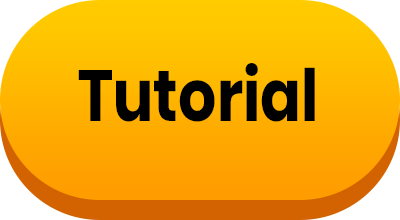
<style>
.page{position:relative;width:400px;height:220px}
.page>*{position:absolute;margin:0}
.t1{font:72px "Poppins-Bold";color:#000000;scale:0.83 1}
</style>
<div class="page">
<p class="t1" style="left:78px;top:63px;width:237px;height:59px">Tutorial</p>
</div>
